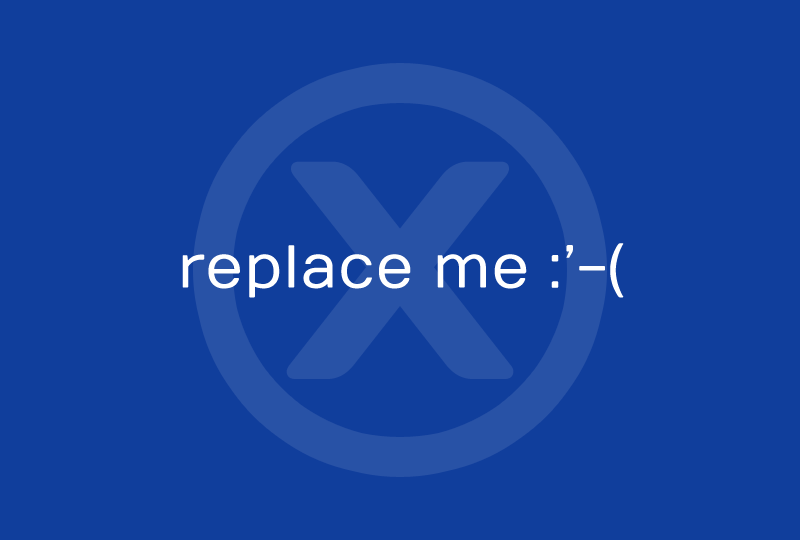
<style>
.page{position:relative;width:800px;height:540px;background:#103e9c}
.page>*{position:absolute;margin:0}
.t1{font:60px "Numans-Regular";color:#ffffff}
</style>
<div class="page">
<p class="t1" style="left:182px;top:243px;width:442px;height:55px">replace me :’-(</p>
</div>
